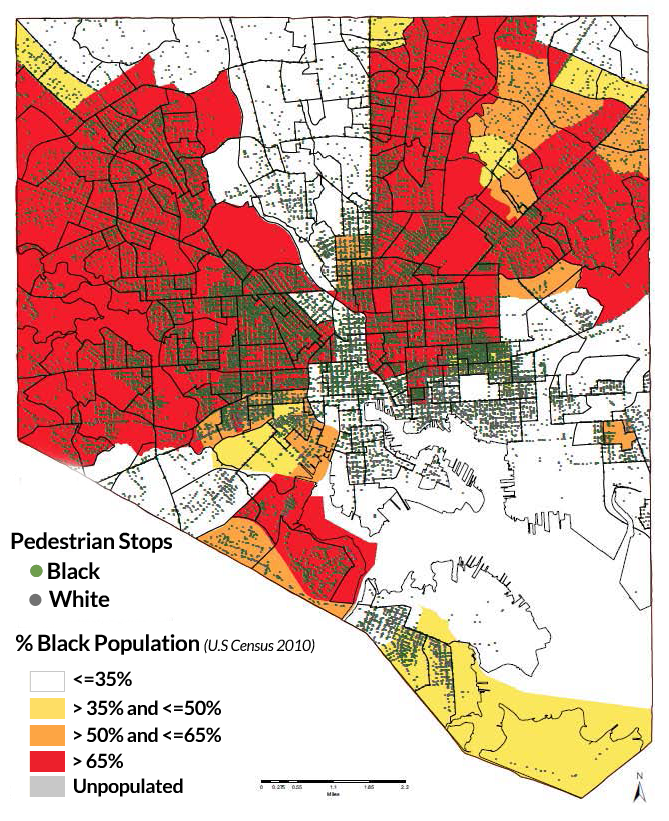
<style>
.page{position:relative;width:669px;height:821px;background:#ffffff}
.page>*{position:absolute;margin:0}
.t1{font:22.4px "Lato-Bold";letter-spacing:-0.02em;color:#000000}
.t2{font:15.4px "Lato-Italic";letter-spacing:-0.02em;color:#000000}
.t3{font:19.6px "Lato-Bold";letter-spacing:-0.02em;color:#000000}
</style>
<div class="page">
<p class="t1" style="left:11px;top:532px;width:161px;height:21px">Pedestrian Stops</p>
<p class="t1" style="left:48px;top:562px;width:52px;height:17px">Black</p>
<p class="t1" style="left:49px;top:590px;width:61px;height:17px">White</p>
<p class="t1" style="left:16px;top:634px;width:299px;height:21px">% Black Population <span class="t2">(U.S Census 2010)</span></p>
<p class="t3" style="left:73px;top:671px;width:59px;height:16px">&lt;=35%</p>
<p class="t3" style="left:74px;top:700px;width:147px;height:16px">&gt; 35% and &lt;=50%</p>
<p class="t3" style="left:74px;top:727px;width:147px;height:15px">&gt; 50% and &lt;=65%</p>
<p class="t3" style="left:73px;top:753px;width:50px;height:15px">&gt; 65%</p>
<p class="t3" style="left:74px;top:778px;width:109px;height:19px">Unpopulated</p>
</div>
